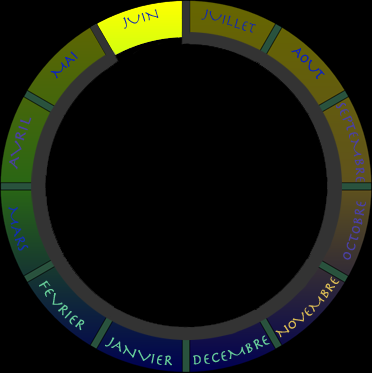
<style>
.page{position:relative;width:372px;height:373px;background:#000000}
.page>*{position:absolute;margin:0}
.t1{font:15px "Herculanum";color:#0f25b6}
.t2{font:14px "Herculanum";color:#4a40a3}
.t3{font:15px "Herculanum";color:#4a40a3}
.t4{font:15px "Herculanum";color:#1330af}
.t5{font:15px "Herculanum";color:#66cc99}
.t6{font:14px "Herculanum";color:#d7b954}
</style>
<div class="page">
<p class="t1" style="left:123px;top:9px;width:36px;height:20px;rotate:-17deg">JUIN</p>
<p class="t1" style="left:201px;top:9px;width:55px;height:24px;rotate:16deg">JUILLET</p>
<p class="t1" style="left:50px;top:51px;width:28px;height:28px;rotate:-45deg">MAI</p>
<p class="t1" style="left:291px;top:48px;width:34px;height:31px;rotate:47deg">AOUT</p>
<p class="t2" style="left:336px;top:103px;width:29px;height:79px;rotate:81deg">SEPTEMBRE</p>
<p class="t3" style="left:9px;top:117px;width:23px;height:53px;rotate:-62deg">AVRIL</p>
<p class="t4" style="left:8px;top:207px;width:21px;height:44px;rotate:65deg">MARS</p>
<p class="t3" style="left:343px;top:201px;width:23px;height:59px;rotate:-82deg">OCTOBRE</p>
<p class="t5" style="left:39px;top:280px;width:46px;height:51px;rotate:42deg">FEVRIER</p>
<p class="t6" style="left:275px;top:276px;width:65px;height:62px;rotate:-48deg">NOVEMBRE</p>
<p class="t5" style="left:105px;top:337px;width:67px;height:29px;rotate:16deg">JANVIER</p>
</div>
